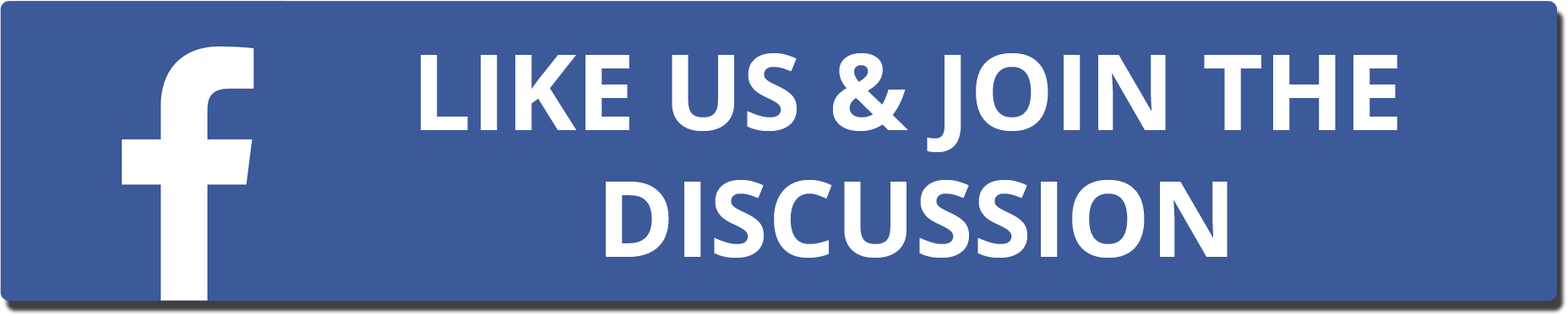
<style>
.page{position:relative;width:1568px;height:316px;background:#3c5a99}
.page>*{position:absolute;margin:0}
.t1{font:105.6px "OpenSans-Bold";color:#ffffff}
</style>
<div class="page">
<p class="t1" style="left:421px;top:53px;width:976px;height:205px;text-align:center">LIKE US &amp; JOIN THE <br>DISCUSSION</p>
</div>
